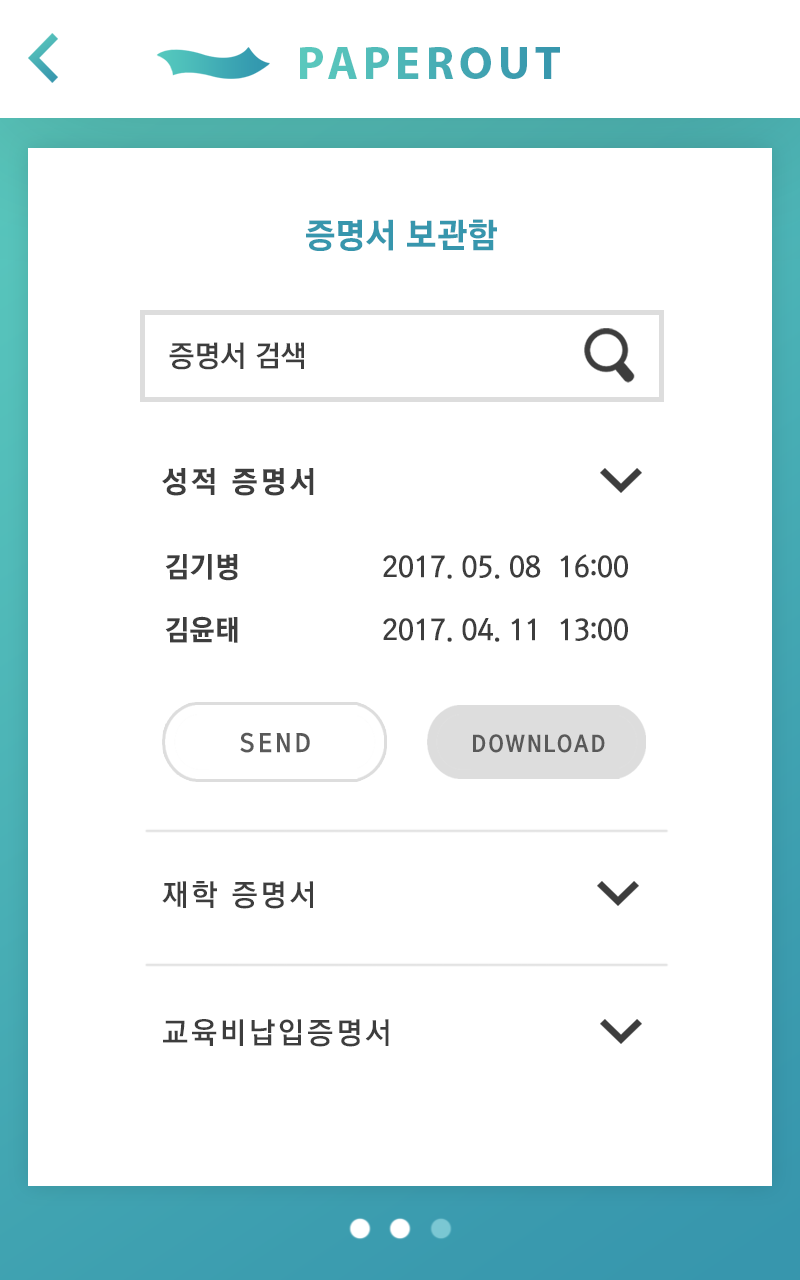
<style>
.page{position:relative;width:800px;height:1280px;background:#ffffff}
.page>*{position:absolute;margin:0}
.t1{font:46.9px "MyriadPro-Bold";letter-spacing:0.11em;color:#49afb5}
.t2{font:34.6px "KoreanGD17-R";color:#3796ad}
.t3{font:29.9px "KoreanGD15-R";color:#3d3d3d}
.t4{font:30px "KoreanGD17-R";letter-spacing:0.1em;color:#3d3d3d}
.t5{font:28.9px/63.6px "KoreanGD15-R";color:#3d3d3d}
.t6{font:28.9px/63.6px "KoreanGD17-R";color:#3d3d3d}
.t7{font:25px "KoreanGD17-R";letter-spacing:0.15em;color:#595959}
.t8{font:22.7px "KoreanGD17-R";letter-spacing:0.1em;color:#595959}
.t9{font:30px "KoreanGD15-R";letter-spacing:0.1em;color:#3d3d3d}
</style>
<div class="page">
<p class="t1" style="left:300px;top:47px;width:260px;height:32px">PAPEROUT</p>
<p class="t2" style="left:306px;top:219px;width:191px;height:32px">증명서 보관함</p>
<p class="t3" style="left:169px;top:342px;width:135px;height:28px">증명서 검색</p>
<p class="t4" style="left:162px;top:468px;width:152px;height:28px">성적 증명서</p>
<p class="t5" style="left:165px;top:554px;width:463px;height:89px"><span class="t6">김기병</span>                 2017. 05. 08  16:00<br><span class="t6">김윤태</span>                 2017. 04. 11  13:00</p>
<p class="t7" style="left:240px;top:732px;width:70px;height:21px">SEND</p>
<p class="t8" style="left:473px;top:734px;width:132px;height:19px">DOWNLOAD</p>
<p class="t9" style="left:162px;top:881px;width:151px;height:28px">재학 증명서</p>
<p class="t9" style="left:163px;top:1019px;width:226px;height:28px">교육비납입증명서</p>
</div>
